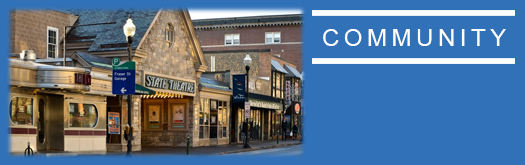
<style>
.page{position:relative;width:525px;height:165px;background:#3171b8}
.page>*{position:absolute;margin:0}
.t1{font:24.2px "ArialMT";letter-spacing:0.19em;color:#ffffff}
</style>
<div class="page">
<p class="t1" style="left:323px;top:29px;width:183px;height:17px">COMMUNITY</p>
</div>
